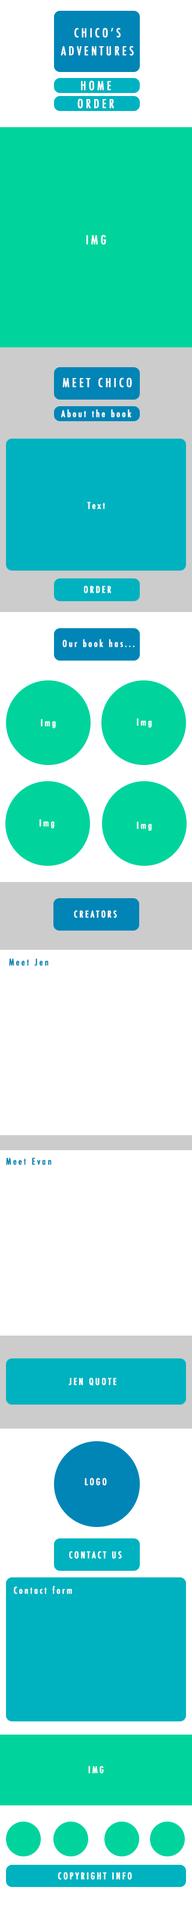
<style>
.page{position:relative;width:192px;height:1905px;background:#ffffff}
.page>*{position:absolute;margin:0}
.t1{font:12px/18px "Futura-CondensedMedium";letter-spacing:0.2em;font-weight:bold}
.t2{font:12px/18px "Futura-CondensedMedium";letter-spacing:0.2em;color:#fefefe;font-weight:bold}
.t3{font:12px "Futura-CondensedMedium";letter-spacing:0.2em;color:#ffffff;font-weight:bold}
.t4{font:12px "Futura-CondensedMedium";letter-spacing:0.2em;color:#fefefe;font-weight:bold}
.t5{font:12px "Futura-CondensedMedium";letter-spacing:0.2em;font-weight:bold}
.t6{font:9px "Futura-CondensedMedium";letter-spacing:0.2em;color:#fefefe;font-weight:bold}
.t7{font:9px "Futura-CondensedMedium";letter-spacing:0.2em;color:#0185b6;font-weight:bold}
.t8{font:9px "Futura-CondensedMedium";letter-spacing:0.2em;color:#ffffff;font-weight:bold}
</style>
<div class="page">
<p class="t1" style="left:59px;top:28px;width:74px;height:28px;text-align:center">CHICO’S<br>ADVENTURES</p>
<p class="t2" style="left:61px;top:28px;width:73px;height:28px;text-align:center">CHICO’S<br>ADVENTURES</p>
<p class="t3" style="left:81px;top:80px;width:30px;height:10px">HOME</p>
<p class="t4" style="left:81px;top:80px;width:30px;height:11px">HOME</p>
<p class="t4" style="left:77px;top:98px;width:37px;height:11px">ORDER</p>
<p class="t5" style="left:78px;top:98px;width:37px;height:11px">ORDER</p>
<p class="t4" style="left:86px;top:235px;width:20px;height:10px">IMG</p>
<p class="t4" style="left:62px;top:377px;width:70px;height:11px">MEET CHICO</p>
<p class="t6" style="left:61px;top:409px;width:70px;height:9px">About the book</p>
<p class="t6" style="left:87px;top:502px;width:18px;height:7px">Text</p>
<p class="t6" style="left:83px;top:586px;width:29px;height:7px">ORDER</p>
<p class="t6" style="left:62px;top:639px;width:72px;height:8px">Our book has...</p>
<p class="t6" style="left:41px;top:719px;width:15px;height:9px">Img</p>
<p class="t6" style="left:137px;top:718px;width:15px;height:10px">Img</p>
<p class="t6" style="left:39px;top:819px;width:16px;height:10px">Img</p>
<p class="t6" style="left:137px;top:821px;width:15px;height:10px">Img</p>
<p class="t6" style="left:74px;top:910px;width:43px;height:8px">CREATORS</p>
<p class="t7" style="left:9px;top:958px;width:40px;height:8px">Meet Jen</p>
<p class="t7" style="left:6px;top:1157px;width:46px;height:8px">Meet Evan</p>
<p class="t8" style="left:68px;top:1378px;width:48px;height:8px">JEN QUOTE</p>
<p class="t8" style="left:85px;top:1478px;width:22px;height:8px">LOGO</p>
<p class="t8" style="left:69px;top:1551px;width:53px;height:8px">CONTACT US</p>
<p class="t8" style="left:14px;top:1586px;width:58px;height:8px">Contact form</p>
<p class="t8" style="left:88px;top:1766px;width:16px;height:8px">IMG</p>
<p class="t8" style="left:58px;top:1872px;width:74px;height:8px">COPYRIGHT INFO</p>
</div>
